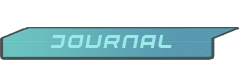
<style>
.page{position:relative;width:250px;height:60px;background:#ffffff}
.page>*{position:absolute;margin:0}
.t1{font:17.7px "UnitedKingdom";letter-spacing:0.13em;color:#9aeaea;font-style:italic}
</style>
<div class="page">
<p class="t1" style="left:50px;top:35px;width:122px;height:13px">Journal</p>
</div>
